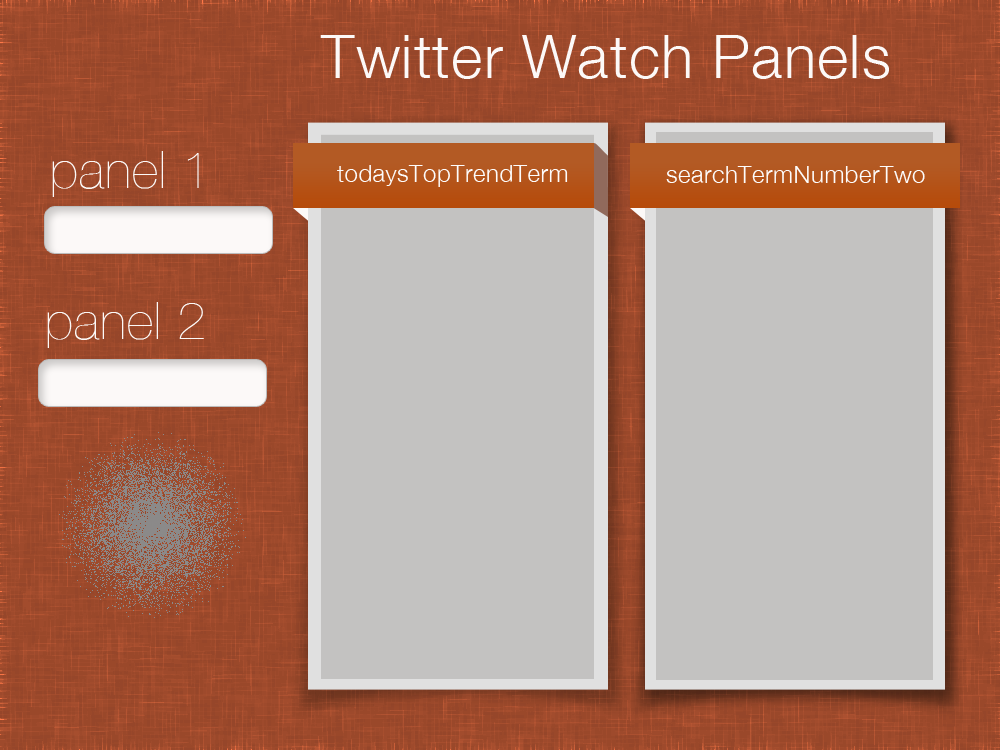
<style>
.page{position:relative;width:1000px;height:750px;background:#c3c2c1}
.page>*{position:absolute;margin:0}
.t1{font:60px "HelveticaNeue-Light";letter-spacing:0.02em;color:#fcf9f8}
.t2{font:52px "HelveticaNeue-UltraLight";letter-spacing:0.02em;color:#fcf9f8}
.t3{font:24px "HelveticaNeue-Light";letter-spacing:0.02em;color:#fdfcfc}
</style>
<div class="page">
<p class="t1" style="left:320px;top:35px;width:569px;height:44px">Twitter Watch Panels</p>
<p class="t2" style="left:52px;top:151px;width:147px;height:46px">panel 1</p>
<p class="t3" style="left:337px;top:165px;width:231px;height:22px">todaysTopTrendTerm</p>
<p class="t3" style="left:666px;top:166px;width:259px;height:17px">searchTermNumberTwo</p>
<p class="t2" style="left:47px;top:302px;width:157px;height:46px">panel 2</p>
</div>
